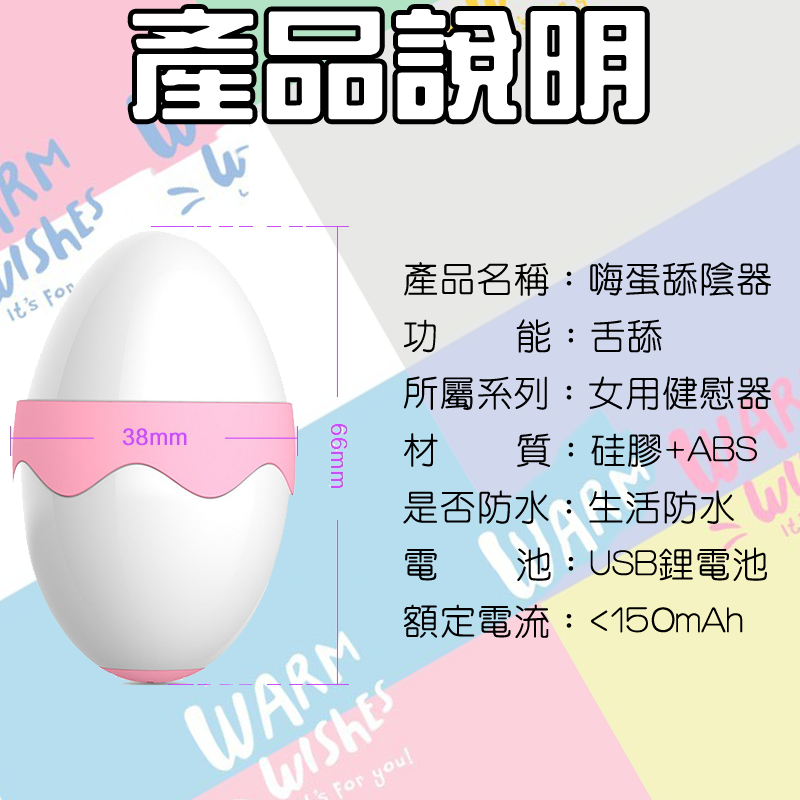
<style>
.page{position:relative;width:800px;height:800px}
.page>*{position:absolute;margin:0}
.t1{font:116.8px "HanWangZonYi";color:#ffffff;font-weight:bold;scale:1.1 1}
.t2{font:36.1px "HanWangYenLight";color:#000000;font-weight:bold}
</style>
<div class="page">
<p class="t1" style="left:132px;top:9px;width:513px;height:111px">產品說明</p>
<p class="t2" style="left:403px;top:262px;width:368px;height:376px">產品名稱：嗨蛋舔陰器<br>功    能：舌舔<br>所屬系列：女用健慰器<br>材    質：硅膠+ABS<br>是否防水：生活防水<br>電    池：USB鋰電池<br>額定電流：&lt;150mAh</p>
</div>
